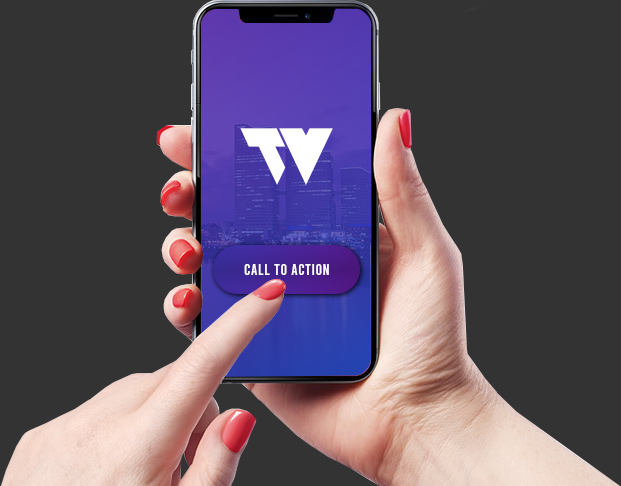
<style>
.page{position:relative;width:621px;height:486px;background:#333333}
.page>*{position:absolute;margin:0}
.t1{font:15px "Bebas-Regular";letter-spacing:0.04em;color:#ffffff}
</style>
<div class="page">
<p class="t1" style="left:244px;top:264px;width:85px;height:11px">call to action</p>
</div>
